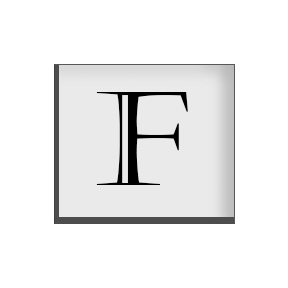
<style>
.page{position:relative;width:288px;height:288px;background:#ffffff}
.page>*{position:absolute;margin:0}
.t1{font:130px "Castellar";color:#000000;scale:1.31 1}
</style>
<div class="page">
<p class="t1" style="left:96px;top:92px;width:92px;height:93px">F</p>
</div>
